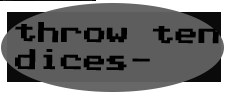
<style>
.page{position:relative;width:227px;height:96px;background:#5d5d5d}
.page>*{position:absolute;margin:0}
.t1{font:22.9px "PressStartK";color:#000000}
.t2{font:50px "PressStartK";color:#000000}
.t3{font:150px "PressStartK";color:#000000}
</style>
<div class="page">
<p class="t1" style="left:15px;top:22px;width:204px;height:49px;rotate:1deg">throw ten dices<span class="t2">d</span><span class="t3">fsfdfs</span></p>
</div>
